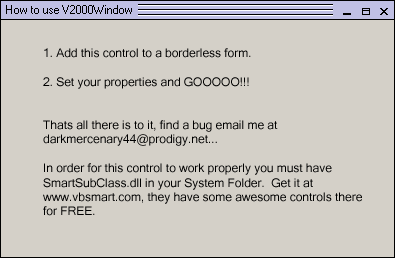
<style>
.page{position:relative;width:395px;height:258px;background:#d4d0c8}
.page>*{position:absolute;margin:0}
.t1{font:12px "MicrosoftSansSerif";color:#000000}
</style>
<div class="page">
<p class="t1" style="left:43px;top:48px;width:319px;height:168px">1. Add this control to a borderless form.<br><br>2. Set your properties and GOOOOO!!!<br><br><br>Thats all there is to it, find a bug email me at <br>darkmercenary44@prodigy.net...<br><br>In order for this control to work properly you must have<br>SmartSubClass.dll in your System Folder.  Get it at<br>www.vbsmart.com, they have some awesome controls there<br>for FREE.</p>
</div>
